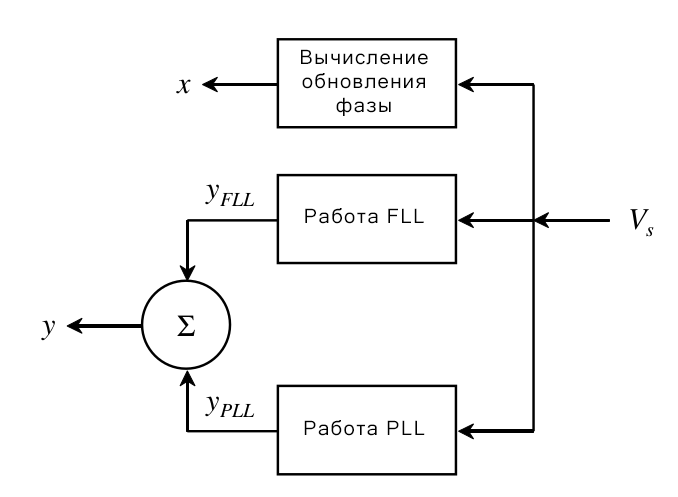
<style>
.page{position:relative;width:678px;height:497px;background:#ffffff}
.page>*{position:absolute;margin:0}
.t1{font:20px "MicrosoftSansSerif";letter-spacing:0.075em;color:#000000}
</style>
<div class="page">
<p class="t1" style="left:301px;top:49px;width:127px;height:67px;text-align:center">Вычисление<br>обновления<br>фазы</p>
<p class="t1" style="left:305px;top:208px;width:119px;height:16px">Работа FLL</p>
<p class="t1" style="left:304px;top:420px;width:121px;height:16px">Работа PLL</p>
</div>
